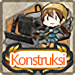
<style>
.page{position:relative;width:75px;height:75px}
.page>*{position:absolute;margin:0}
.t1{font:16px "AdobeClean-SemiCn";letter-spacing:-0.08em;color:#ff5a00}
</style>
<div class="page">
<p class="t1" style="left:11px;top:53px;width:54px;height:13px">Konstruksi</p>
</div>
